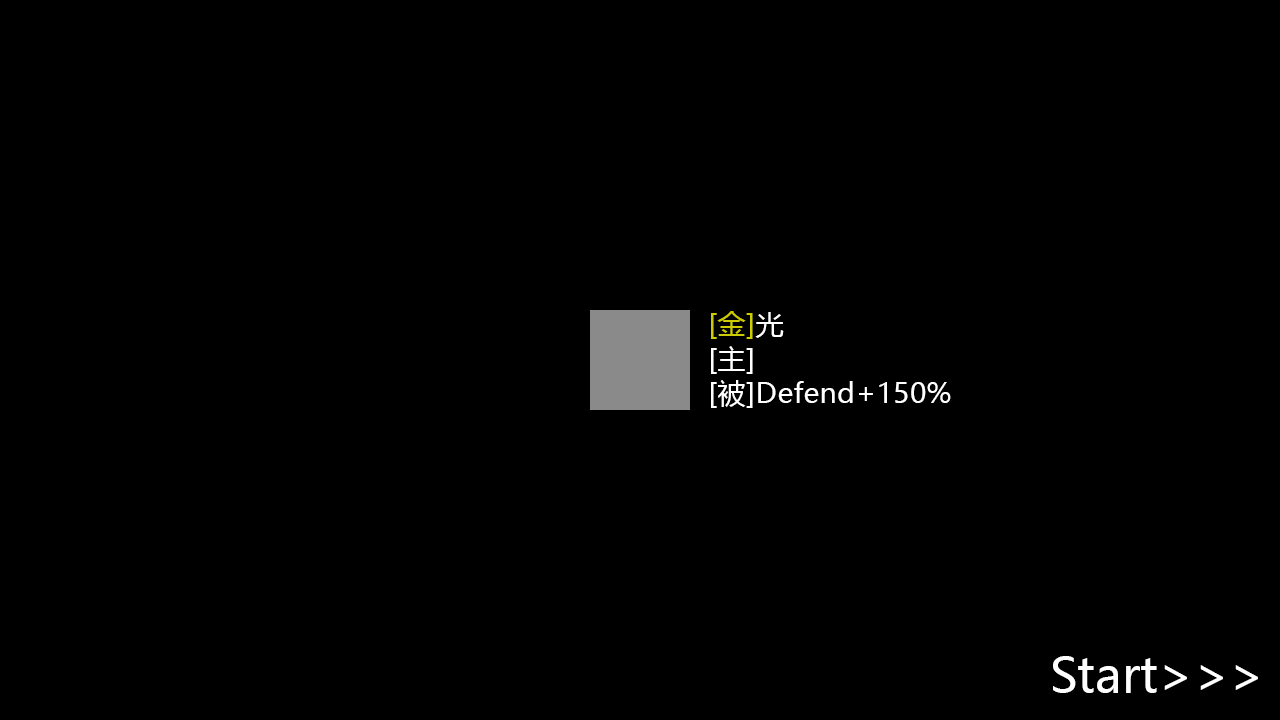
<style>
.page{position:relative;width:1280px;height:720px;background:#000000}
.page>*{position:absolute;margin:0}
.t1{font:28.5px "MicrosoftYaHei";color:#ffffff}
.t2{font:28.5px "MicrosoftYaHei";color:#cccc00}
.t3{font:48px "MicrosoftYaHei";color:#ffffff}
</style>
<div class="page">
<p class="t1" style="left:711px;top:311px;width:240px;height:97px"><span class="t2">[金]</span>光<br>[主]<br>[被]Defend+150%</p>
<p class="t3" style="left:1053px;top:656px;width:205px;height:37px">Start&gt;&gt;&gt;</p>
</div>
